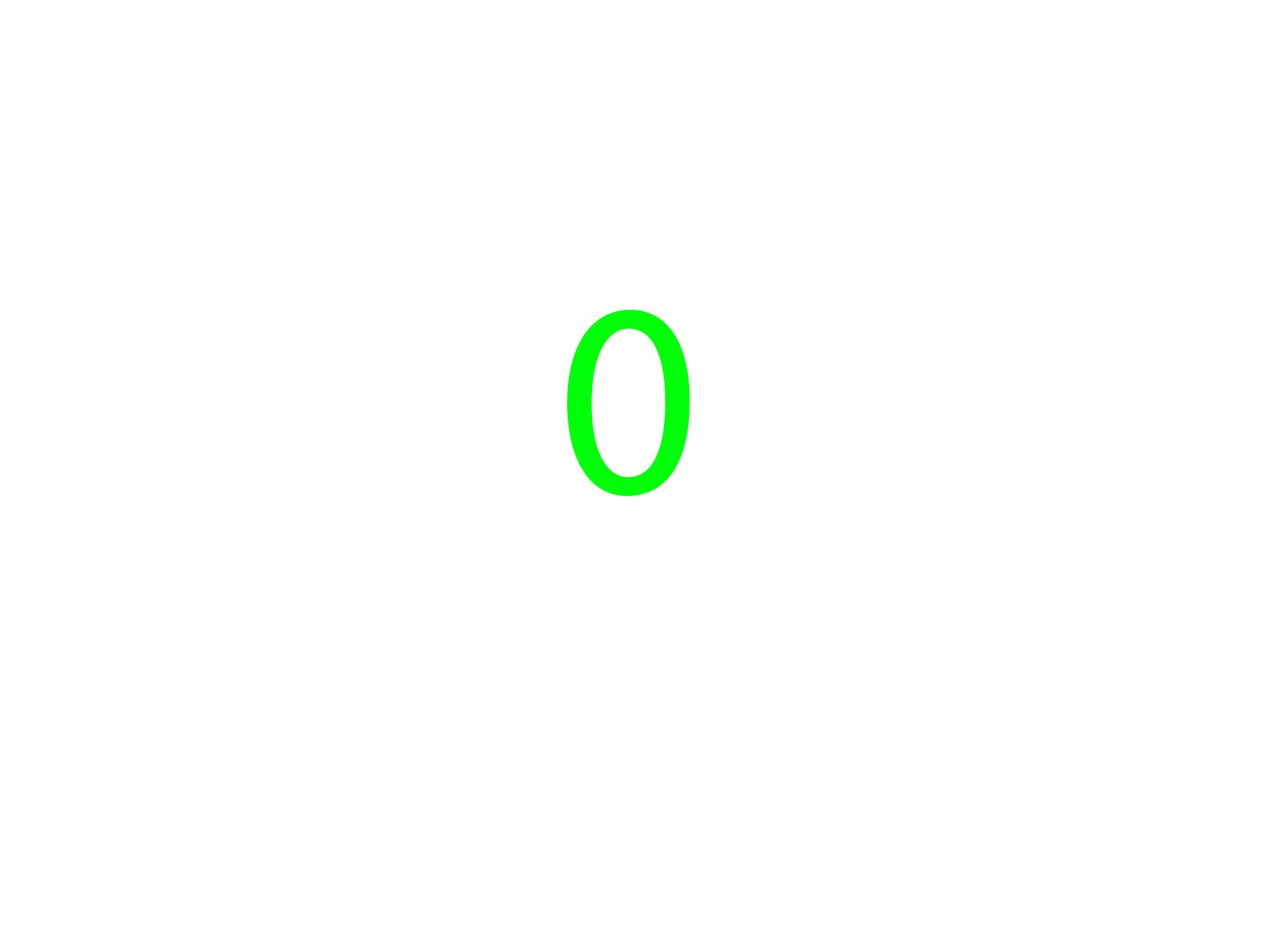
<style>
.page{position:relative;width:1261px;height:946px;background:#ffffff}
.page>*{position:absolute;margin:0}
.t1{font:278px "MyriadPro-Regular";color:#00ff08}
</style>
<div class="page">
<p class="t1" style="left:567px;top:310px;width:123px;height:186px">0</p>
</div>
